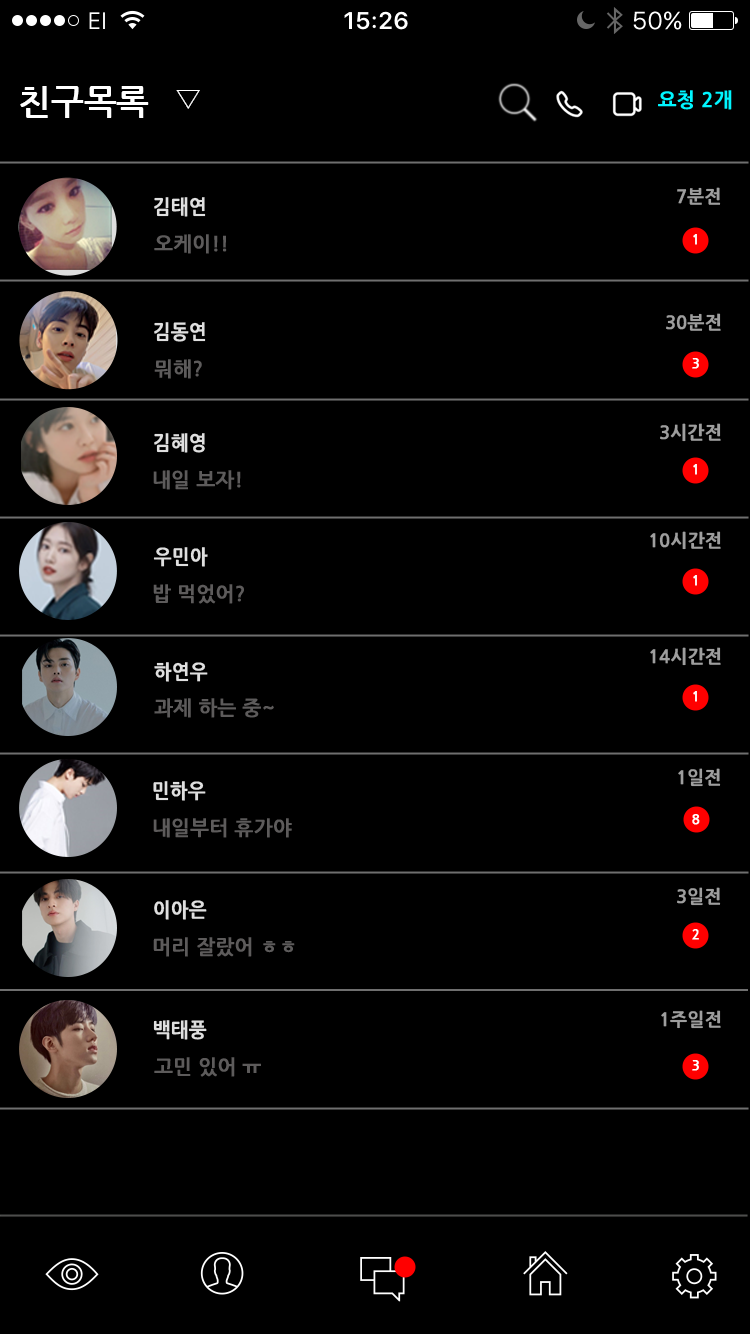
<style>
.page{position:relative;width:750px;height:1334px;background:#000000}
.page>*{position:absolute;margin:0}
.t1{font:35px "NanumGothicBold";color:#ffffff}
.t2{font:30px "Gulim";color:#ffffff}
.t3{font:20px "NanumGothicBold";color:#00f6ff;font-weight:bold}
.t4{font:20px "NanumGothicBold";color:#dfdfdf;font-weight:bold;scale:0.93 1}
.t5{font:18px "NanumGothicBold";color:#9e9e9e;font-weight:bold}
.t6{font:20px "NanumGothicBold";color:#5d5b5b;font-weight:bold}
.t7{font:13px "NanumGothicBold";color:#ffffff;font-weight:bold}
</style>
<div class="page">
<p class="t1" style="left:20px;top:86px;width:129px;height:32px">친구목록</p>
<p class="t2" style="left:176px;top:90px;width:24px;height:19px">▽</p>
<p class="t3" style="left:658px;top:90px;width:74px;height:20px">요청 2개</p>
<p class="t4" style="left:154px;top:197px;width:52px;height:20px">김태연</p>
<p class="t5" style="left:677px;top:187px;width:44px;height:18px">7분전</p>
<p class="t6" style="left:154px;top:234px;width:73px;height:20px">오케이!!</p>
<p class="t7" style="left:693px;top:234px;width:4px;height:11px">1</p>
<p class="t5" style="left:666px;top:313px;width:55px;height:18px">30분전</p>
<p class="t4" style="left:154px;top:322px;width:52px;height:20px">김동연</p>
<p class="t6" style="left:154px;top:359px;width:48px;height:20px">뭐해?</p>
<p class="t7" style="left:692px;top:358px;width:7px;height:11px">3</p>
<p class="t5" style="left:660px;top:423px;width:61px;height:19px">3시간전</p>
<p class="t4" style="left:154px;top:433px;width:51px;height:20px">김혜영</p>
<p class="t6" style="left:153px;top:470px;width:88px;height:20px">내일 보자!</p>
<p class="t7" style="left:693px;top:464px;width:4px;height:11px">1</p>
<p class="t5" style="left:650px;top:531px;width:71px;height:19px">10시간전</p>
<p class="t4" style="left:153px;top:547px;width:55px;height:20px">우민아</p>
<p class="t7" style="left:693px;top:575px;width:4px;height:11px">1</p>
<p class="t6" style="left:153px;top:584px;width:91px;height:20px">밥 먹었어?</p>
<p class="t5" style="left:650px;top:647px;width:71px;height:19px">14시간전</p>
<p class="t4" style="left:154px;top:662px;width:54px;height:20px">하연우</p>
<p class="t6" style="left:154px;top:698px;width:120px;height:20px">과제 하는 중~</p>
<p class="t7" style="left:693px;top:691px;width:4px;height:11px">1</p>
<p class="t5" style="left:678px;top:768px;width:43px;height:19px">1일전</p>
<p class="t4" style="left:153px;top:781px;width:53px;height:20px">민하우</p>
<p class="t6" style="left:153px;top:818px;width:139px;height:20px">내일부터 휴가야</p>
<p class="t7" style="left:692px;top:814px;width:8px;height:11px">8</p>
<p class="t5" style="left:677px;top:887px;width:44px;height:19px">3일전</p>
<p class="t4" style="left:154px;top:900px;width:53px;height:20px">이아은</p>
<p class="t7" style="left:692px;top:929px;width:7px;height:11px">2</p>
<p class="t6" style="left:153px;top:937px;width:142px;height:20px">머리 잘랐어 ㅎㅎ</p>
<p class="t5" style="left:661px;top:1010px;width:60px;height:19px">1주일전</p>
<p class="t4" style="left:153px;top:1020px;width:54px;height:20px">백태풍</p>
<p class="t6" style="left:154px;top:1057px;width:107px;height:20px">고민 있어 ㅠ</p>
<p class="t7" style="left:692px;top:1060px;width:7px;height:11px">3</p>
</div>
